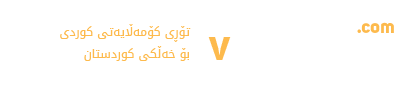
<style>
.page{position:relative;width:400px;height:90px;background:#ffffff}
.page>*{position:absolute;margin:0}
.t1{font:12px "DroidArabicKufi";color:#fdba4d}
.t2{font:19.3px "Uni-Sans-Bold";color:#fdba4d}
.t3{font:43.3px "Uni-Sans-Bold";color:#fdba4d}
</style>
<div class="page">
<p class="t1" style="left:60px;top:24px;width:131px;height:37px;text-align:right">تۆڕی کۆمەڵایەتی کوردی<br>بۆ خەڵکی کوردستان</p>
<p class="t2" style="left:357px;top:22px;width:37px;height:11px">.com</p>
<p class="t3" style="left:208px;top:37px;width:23px;height:23px">v</p>
</div>
